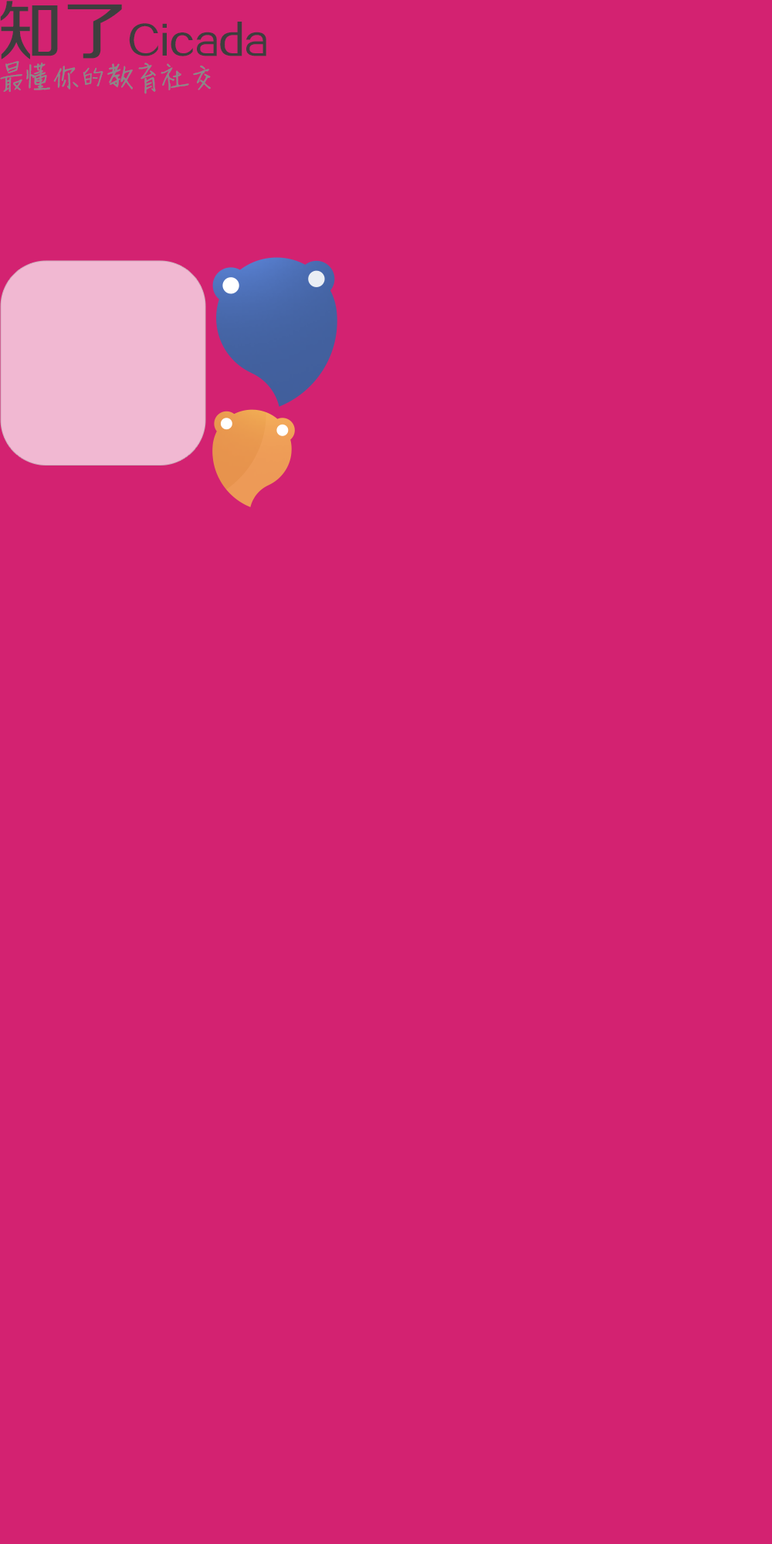
<style>
.page{position:relative;width:772px;height:1544px;background:#d32271}
.page>*{position:absolute;margin:0}
.t1{font:38.4px "FZZZHUNHJW--GB1-0";color:#3e3e3e}
.t2{font:65.5px "FZZZHUNHJW--GB1-0";color:#3e3e3e}
.t3{font:25.3px "SentyMARUKO-Elementary";color:#898989}
</style>
<div class="page">
<p class="t1" style="left:0px;top:1px;width:266px;height:58px"><span class="t2">知了</span>Cicada</p>
<p class="t3" style="left:0px;top:61px;width:211px;height:33px">最懂你的教育社交</p>
</div>
